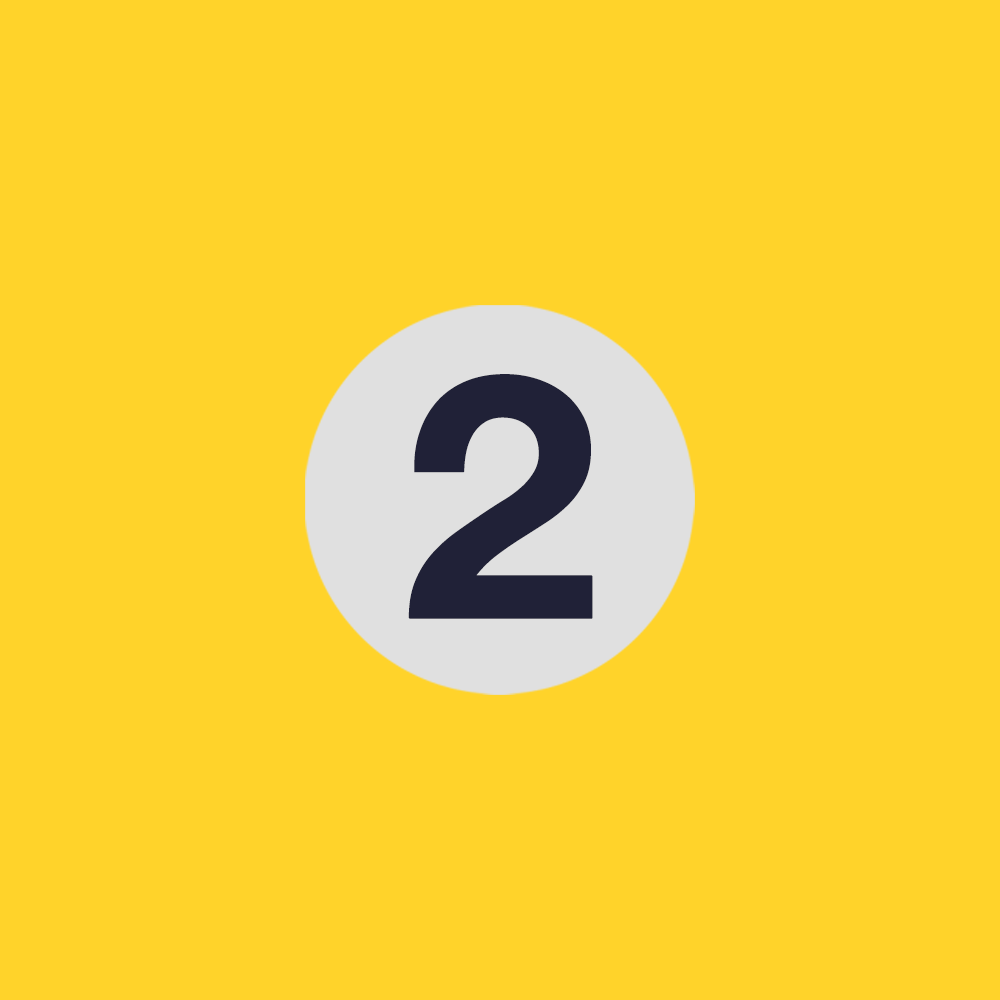
<style>
.page{position:relative;width:1000px;height:1000px;background:#ffd32a}
.page>*{position:absolute;margin:0}
.t1{font:340px "HelveticaNeue-Bold";color:#202137;font-weight:bold;scale:1.04 1}
</style>
<div class="page">
<p class="t1" style="left:408px;top:374px;width:185px;height:245px">2</p>
</div>
